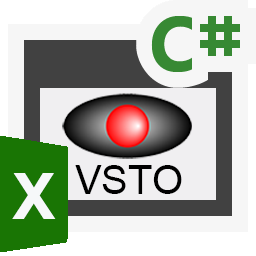
<style>
.page{position:relative;width:256px;height:256px;background:#f6f6f6}
.page>*{position:absolute;margin:0}
.t1{font:64px "Arial-BoldMT";color:#f6f8f9}
.t2{font:40px "ArialMT";color:#000000}
</style>
<div class="page">
<p class="t1" style="left:12px;top:173px;width:44px;height:46px">X</p>
<p class="t2" style="left:75px;top:165px;width:107px;height:29px">VSTO</p>
</div>
